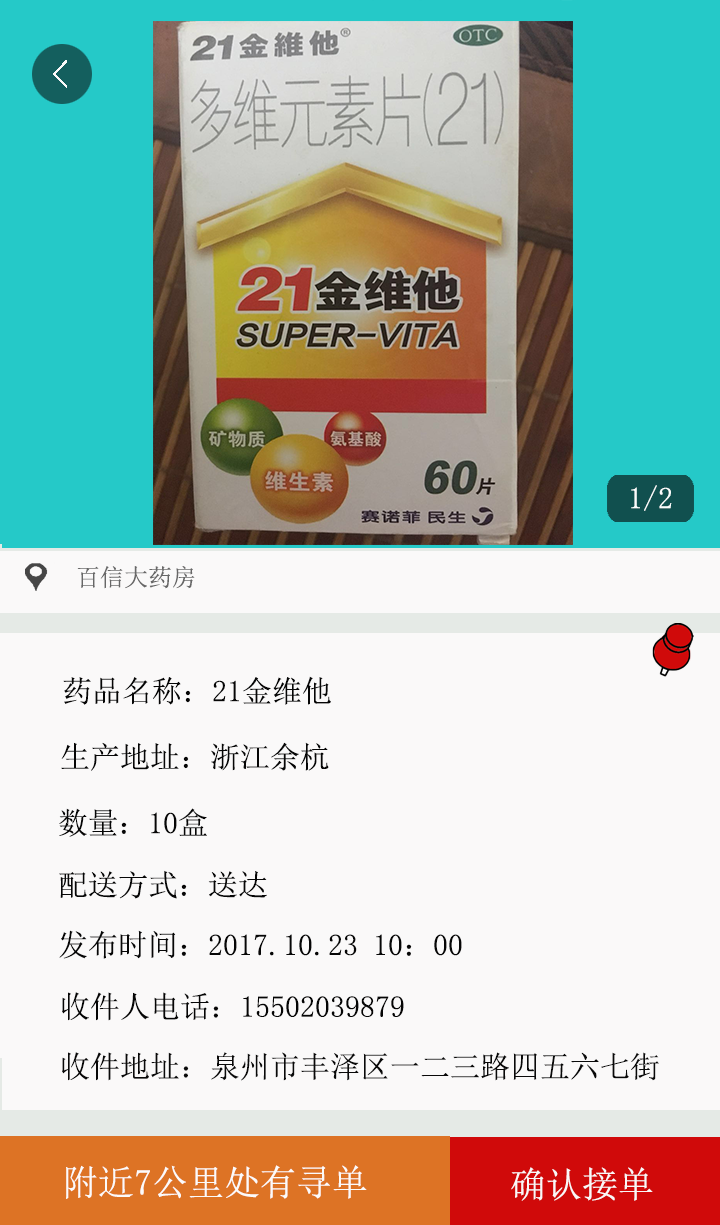
<style>
.page{position:relative;width:720px;height:1225px;background:#faf9f9}
.page>*{position:absolute;margin:0}
.t1{font:30px "SimSun";color:#fafdfd}
.t2{font:24px "SimSun";color:#676767}
.t3{font:30px "SimSun";color:#060606}
.t4{font:36px "SimSun";color:#fcfbfa}
.t5{font:36px "SimSun";color:#dd7325}
.t6{font:36px "SimSun";color:#faf8f8}
</style>
<div class="page">
<p class="t1" style="left:631px;top:485px;width:41px;height:26px">1/2</p>
<p class="t2" style="left:77px;top:566px;width:118px;height:23px">百信大药房</p>
<p class="t3" style="left:63px;top:676px;width:268px;height:29px">药品名称：21金维他</p>
<p class="t3" style="left:61px;top:742px;width:268px;height:29px">生产地址：浙江余杭</p>
<p class="t3" style="left:59px;top:808px;width:148px;height:29px">数量：10盒</p>
<p class="t3" style="left:59px;top:870px;width:208px;height:29px">配送方式：送达</p>
<p class="t3" style="left:59px;top:930px;width:403px;height:29px">发布时间：2017.10.23 10：00</p>
<p class="t4" style="left:45px;top:1165px;width:322px;height:34px"><span class="t5">f</span>附近7公里处有寻单</p>
<p class="t6" style="left:511px;top:1167px;width:142px;height:34px">确认接单</p>
</div>
